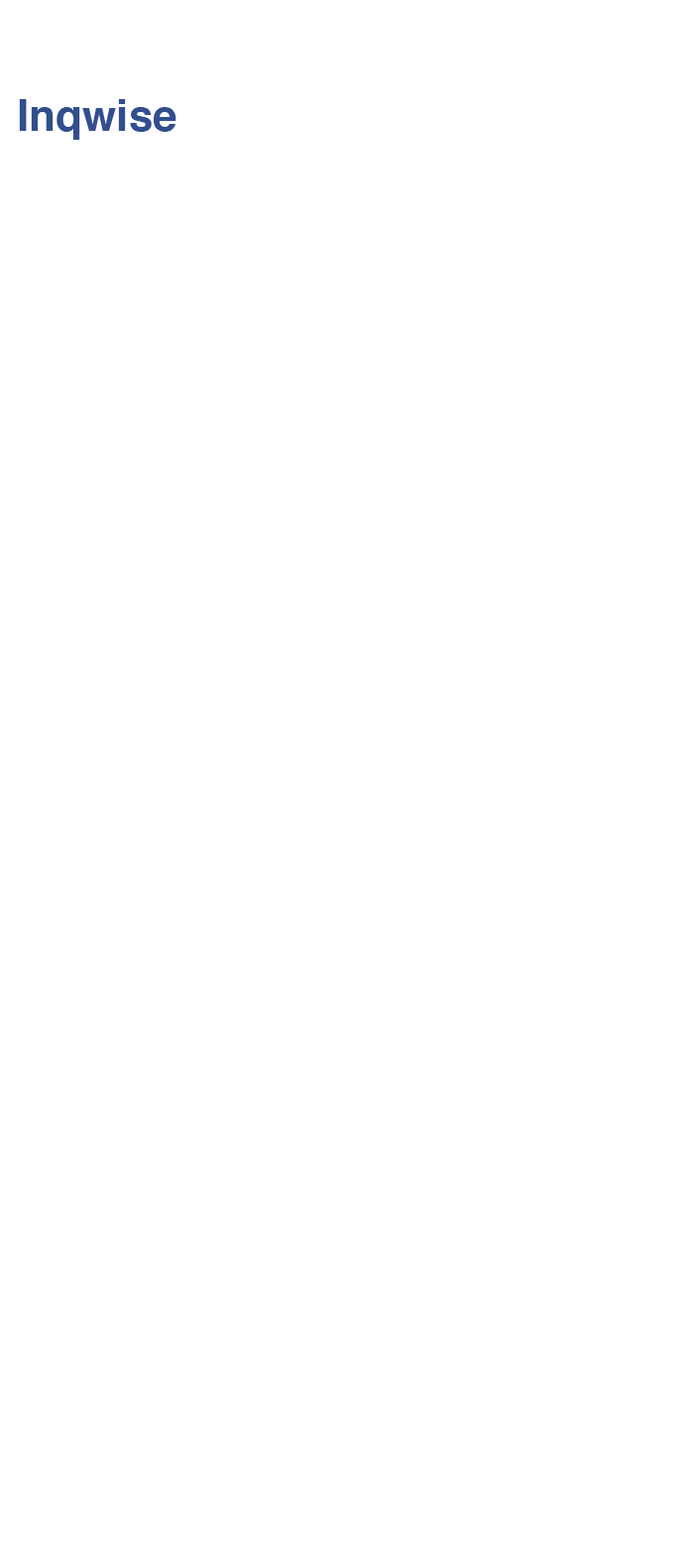
<style>
.page{position:relative;width:694px;height:1568px;background:#ffffff}
.page>*{position:absolute;margin:0}
.t1{font:43.6px "Helvetica-Bold";color:#324e8d}
</style>
<div class="page">
<p class="t1" style="left:19px;top:99px;width:157px;height:41px">Inqwise</p>
</div>
